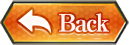
<style>
.page{position:relative;width:129px;height:45px}
.page>*{position:absolute;margin:0}
.t1{font:24px "RyuminPro-ExBold";letter-spacing:-0.08em;color:#fff6f2}
</style>
<div class="page">
<p class="t1" style="left:59px;top:13px;width:50px;height:19px">Back</p>
</div>
